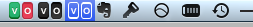
<style>
.page{position:relative;width:253px;height:27px}
.page>*{position:absolute;margin:0}
.t1{font:7.8px "Helvetica-Bold";color:#ffffff;scale:1.19 1}
.t2{font:8.2px "Helvetica-Bold";color:#ffffff;scale:1.1 1}
</style>
<div class="page">
<p class="t1" style="left:11px;top:8px;width:7px;height:6px">V</p>
<p class="t2" style="left:24px;top:7px;width:7px;height:7px">O</p>
<p class="t1" style="left:40px;top:8px;width:7px;height:6px">V</p>
<p class="t2" style="left:53px;top:7px;width:7px;height:7px">O</p>
<p class="t1" style="left:70px;top:8px;width:7px;height:6px">V</p>
<p class="t2" style="left:83px;top:7px;width:7px;height:7px">O</p>
</div>
